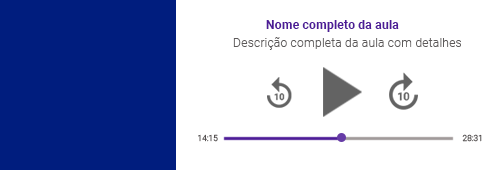
<style>
.page{position:relative;width:500px;height:170px;background:#ffffff}
.page>*{position:absolute;margin:0}
.t1{font:12.5px "Roboto-Bold";color:#4d1c97}
.t2{font:12.5px "Roboto-Light";color:#5d5a5a}
</style>
<div class="page">
<p class="t1" style="left:266px;top:20px;width:133px;height:12px">Nome completo da aula</p>
<p class="t2" style="left:233px;top:37px;width:228px;height:13px">Descrição completa da aula com detalhes</p>
</div>
